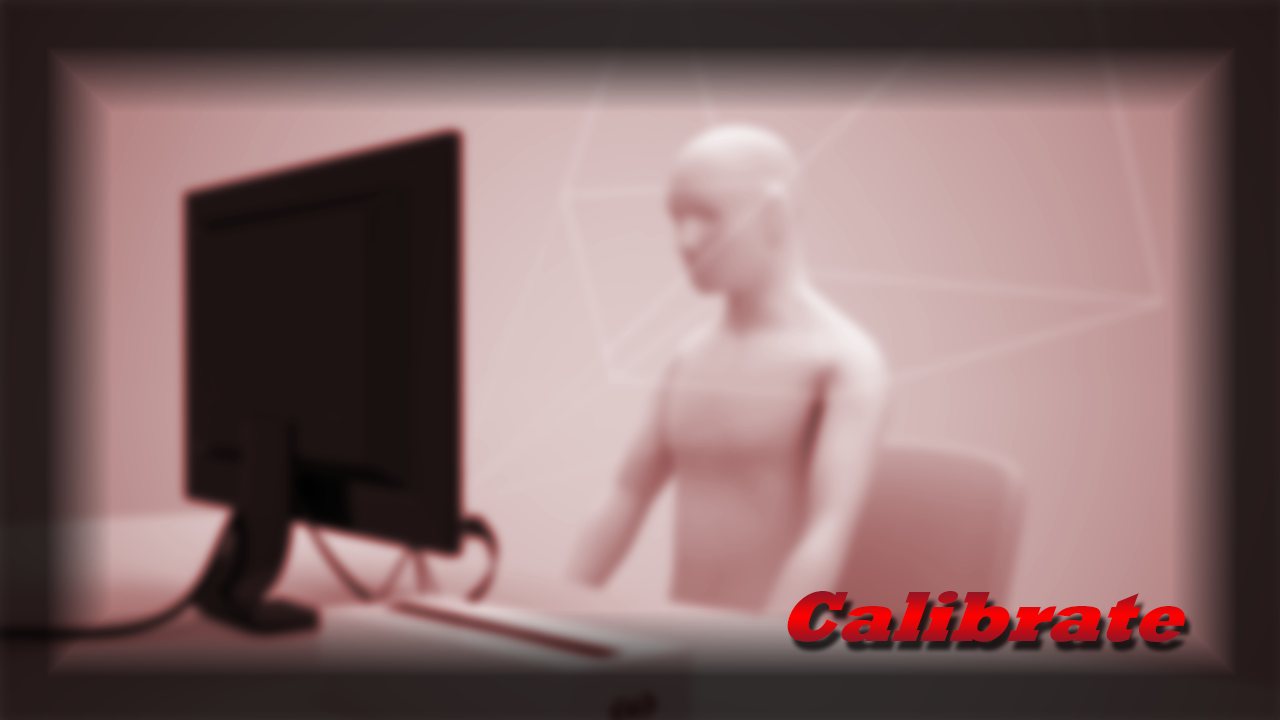
<style>
.page{position:relative;width:1280px;height:720px}
.page>*{position:absolute;margin:0}
.t1{font:76.6px "Rockwell-ExtraBold";scale:0.94 1}
</style>
<div class="page">
<p class="t1" style="left:787px;top:591px;width:398px;height:51px">Calibrate</p>
</div>
